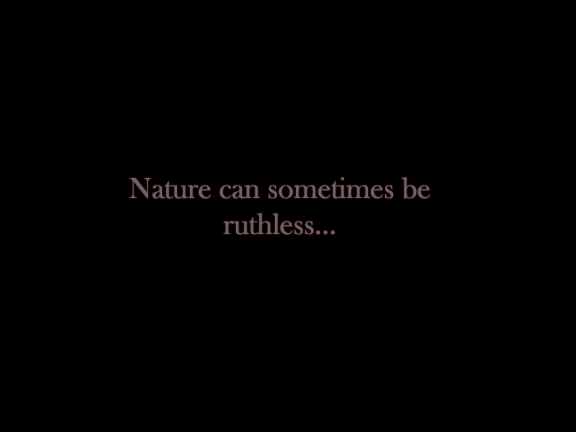
<style>
.page{position:relative;width:576px;height:432px;background:#000000}
.page>*{position:absolute;margin:0}
.t1{font:30px "BaskOldFace";color:#686666}
</style>
<div class="page">
<p class="t1" style="left:129px;top:177px;width:301px;height:58px;text-align:center">Nature can sometimes be<br>ruthless...</p>
</div>
